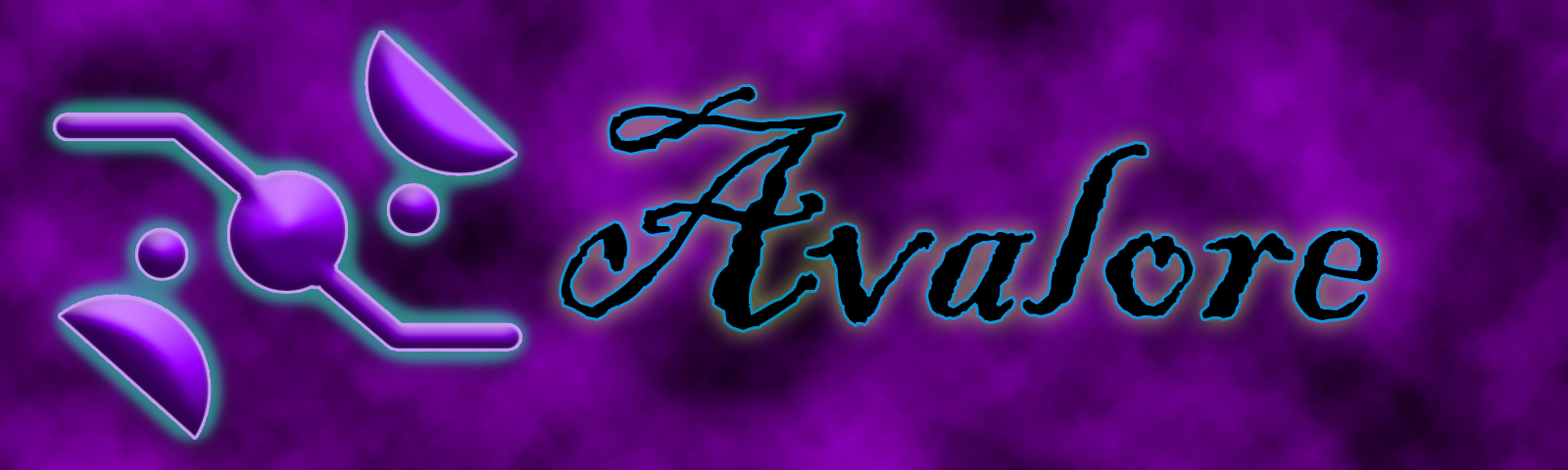
<style>
.page{position:relative;width:1568px;height:470px}
.page>*{position:absolute;margin:0}
.t1{font:301px "BlackadderITC-Regular";color:#000000}
</style>
<div class="page">
<p class="t1" style="left:561px;top:86px;width:818px;height:244px">Avalore</p>
</div>
